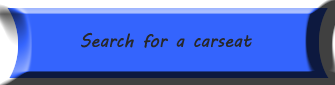
<style>
.page{position:relative;width:335px;height:85px;background:#3464fd}
.page>*{position:absolute;margin:0}
.t1{font:18px "MVBoli";color:#28282a}
</style>
<div class="page">
<p class="t1" style="left:81px;top:32px;width:171px;height:16px">Search for a carseat</p>
</div>
